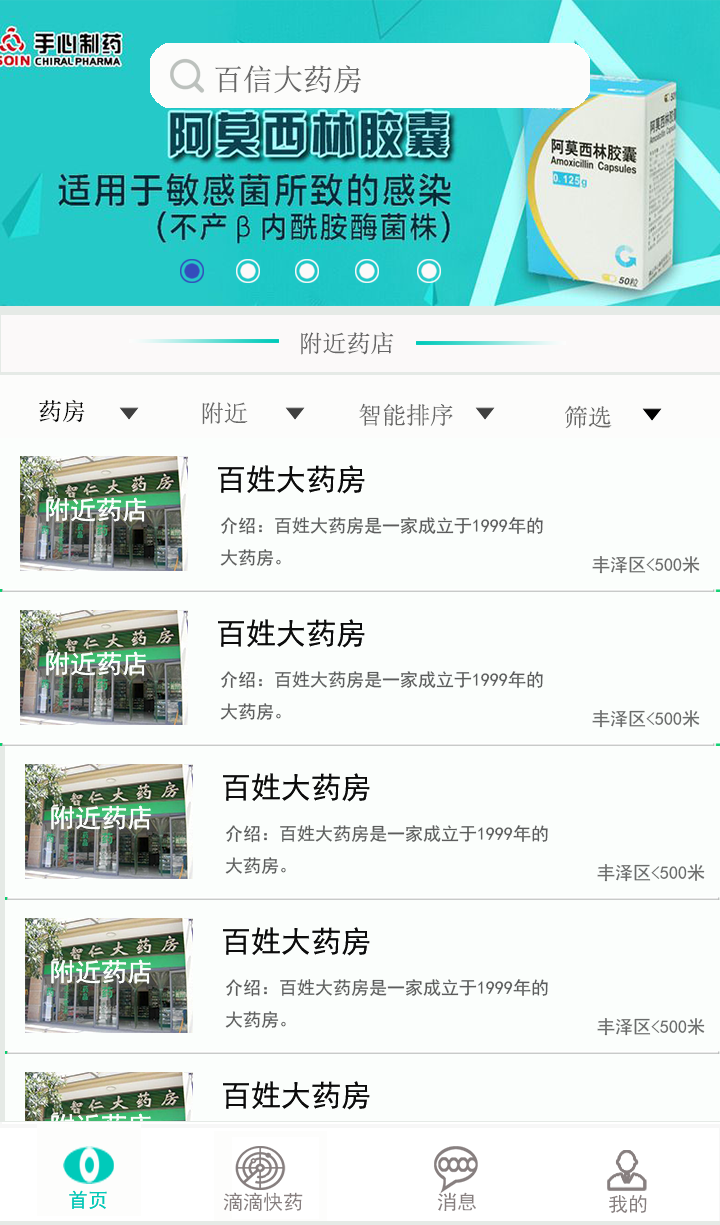
<style>
.page{position:relative;width:720px;height:1225px;background:#fbfefc}
.page>*{position:absolute;margin:0}
.t1{font:30px "SimSun";color:#686868}
.t2{font:24px "SimSun";color:#676666}
.t3{font:24px "SimSun";color:#050505}
.t4{font:24px "SimSun";color:#686867}
.t5{font:30px "SimHei";color:#0c0c0c}
.t6{font:18px "SimHei";color:#5b5c5c}
.t7{font:18px "SimHei";color:#696b6a}
</style>
<div class="page">
<p class="t1" style="left:215px;top:65px;width:146px;height:29px">百信大药房</p>
<p class="t2" style="left:301px;top:332px;width:93px;height:23px">附近药店</p>
<p class="t3" style="left:39px;top:399px;width:46px;height:24px">药房</p>
<p class="t4" style="left:202px;top:402px;width:46px;height:23px">附近</p>
<p class="t4" style="left:359px;top:403px;width:94px;height:23px">智能排序</p>
<p class="t4" style="left:565px;top:405px;width:47px;height:24px">筛选</p>
<p class="t5" style="left:218px;top:465px;width:147px;height:29px">百姓大药房</p>
<p class="t5" style="left:218px;top:465px;width:147px;height:29px">百姓大药房</p>
<p class="t6" style="left:220px;top:517px;width:323px;height:49px">介绍：百姓大药房是一家成立于1999年的<br>大药房。</p>
<p class="t7" style="left:592px;top:556px;width:108px;height:18px">丰泽区&lt;500米</p>
<p class="t5" style="left:218px;top:619px;width:147px;height:29px">百姓大药房</p>
<p class="t5" style="left:218px;top:619px;width:147px;height:29px">百姓大药房</p>
<p class="t6" style="left:220px;top:671px;width:323px;height:49px">介绍：百姓大药房是一家成立于1999年的<br>大药房。</p>
<p class="t7" style="left:592px;top:710px;width:108px;height:18px">丰泽区&lt;500米</p>
<p class="t5" style="left:223px;top:773px;width:147px;height:29px">百姓大药房</p>
<p class="t5" style="left:223px;top:773px;width:147px;height:29px">百姓大药房</p>
<p class="t6" style="left:225px;top:825px;width:323px;height:49px">介绍：百姓大药房是一家成立于1999年的<br>大药房。</p>
<p class="t7" style="left:597px;top:864px;width:108px;height:18px">丰泽区&lt;500米</p>
<p class="t5" style="left:223px;top:927px;width:147px;height:29px">百姓大药房</p>
<p class="t5" style="left:223px;top:927px;width:147px;height:29px">百姓大药房</p>
<p class="t6" style="left:225px;top:979px;width:323px;height:49px">介绍：百姓大药房是一家成立于1999年的<br>大药房。</p>
<p class="t7" style="left:597px;top:1018px;width:108px;height:18px">丰泽区&lt;500米</p>
<p class="t5" style="left:223px;top:1081px;width:147px;height:29px">百姓大药房</p>
<p class="t5" style="left:223px;top:1081px;width:147px;height:29px">百姓大药房</p>
</div>
